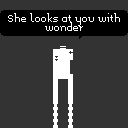
<style>
.page{position:relative;width:128px;height:128px;background:#333333}
.page>*{position:absolute;margin:0}
.t1{font:8px "Memoria";color:#ffffff}
</style>
<div class="page">
<p class="t1" style="left:8px;top:13px;width:112px;height:18px;text-align:center">She looks at you with<br>wonder</p>
</div>
